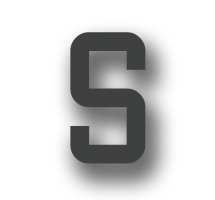
<style>
.page{position:relative;width:215px;height:200px;background:#ffffff}
.page>*{position:absolute;margin:0}
.t1{font:150px "Manteka";color:#3f4040}
</style>
<div class="page">
<p class="t1" style="left:70px;top:32px;width:76px;height:132px">S</p>
</div>
